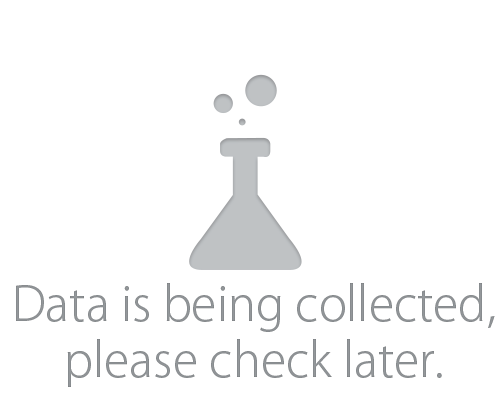
<style>
.page{position:relative;width:500px;height:400px;background:#ffffff}
.page>*{position:absolute;margin:0}
.t1{font:47px "KozGoPr6N-Light";color:#94989b}
</style>
<div class="page">
<p class="t1" style="left:16px;top:283px;width:479px;height:104px;text-align:center">Data is being collected,<br>please check later.</p>
</div>
